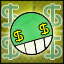
<style>
.page{position:relative;width:64px;height:64px}
.page>*{position:absolute;margin:0}
.t1{font:12px "StarAvenue";color:#f0ff00}
</style>
<div class="page">
<p class="t1" style="left:13px;top:23px;width:36px;height:19px;rotate:-14deg">$     $</p>
</div>
